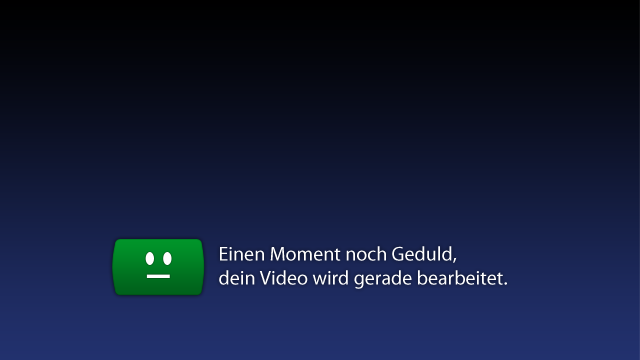
<style>
.page{position:relative;width:640px;height:360px}
.page>*{position:absolute;margin:0}
.t1{font:20px "MyriadPro-Regular";color:#ffffff}
</style>
<div class="page">
<p class="t1" style="left:219px;top:246px;width:288px;height:43px">Einen Moment noch Geduld,<br>dein Video wird gerade bearbeitet.</p>
</div>
